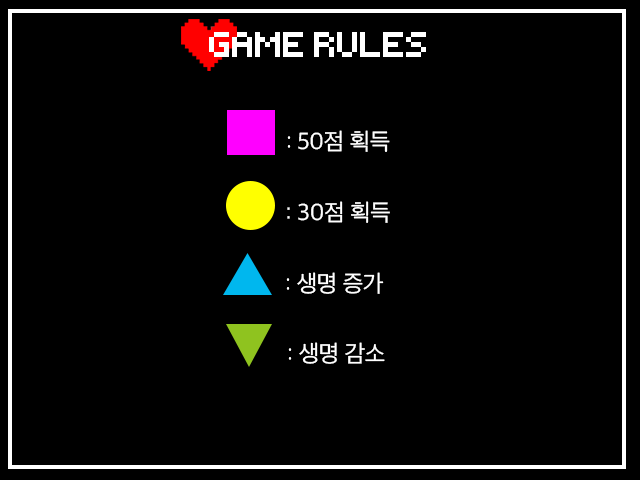
<style>
.page{position:relative;width:640px;height:480px;background:#000000}
.page>*{position:absolute;margin:0}
.t1{font:80px "SnareDrumThreeNBP";letter-spacing:-0.025em;color:#ffffff}
.t2{font:24px "AppleSDGothicNeoR00";letter-spacing:-0.025em;color:#ffffff}
</style>
<div class="page">
<p class="t1" style="left:209px;top:32px;width:217px;height:25px">GAME RULES</p>
<p class="t2" style="left:287px;top:130px;width:103px;height:22px">: 50점 획득</p>
<p class="t2" style="left:287px;top:201px;width:103px;height:22px">: 30점 획득</p>
<p class="t2" style="left:286px;top:272px;width:98px;height:22px">: 생명 증가</p>
<p class="t2" style="left:288px;top:342px;width:97px;height:22px">: 생명 감소</p>
</div>
